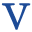
<style>
.page{position:relative;width:32px;height:32px;background:#ffffff}
.page>*{position:absolute;margin:0}
.t1{font:38.9px "Garamond";color:#1d4b97;font-weight:bold}
</style>
<div class="page">
<p class="t1" style="left:1px;top:3px;width:30px;height:27px">V</p>
</div>
